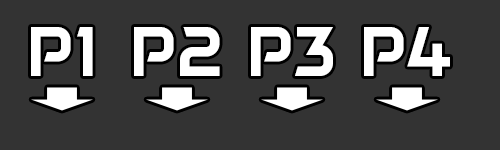
<style>
.page{position:relative;width:500px;height:150px;background:#333333}
.page>*{position:absolute;margin:0}
.t1{font:72px "DAGGERSQUARE";color:#ffffff}
</style>
<div class="page">
<p class="t1" style="left:31px;top:27px;width:62px;height:49px">P1</p>
<p class="t1" style="left:134px;top:27px;width:86px;height:49px">P2</p>
<p class="t1" style="left:251px;top:27px;width:82px;height:49px">P3</p>
<p class="t1" style="left:364px;top:27px;width:86px;height:49px">P4</p>
</div>
